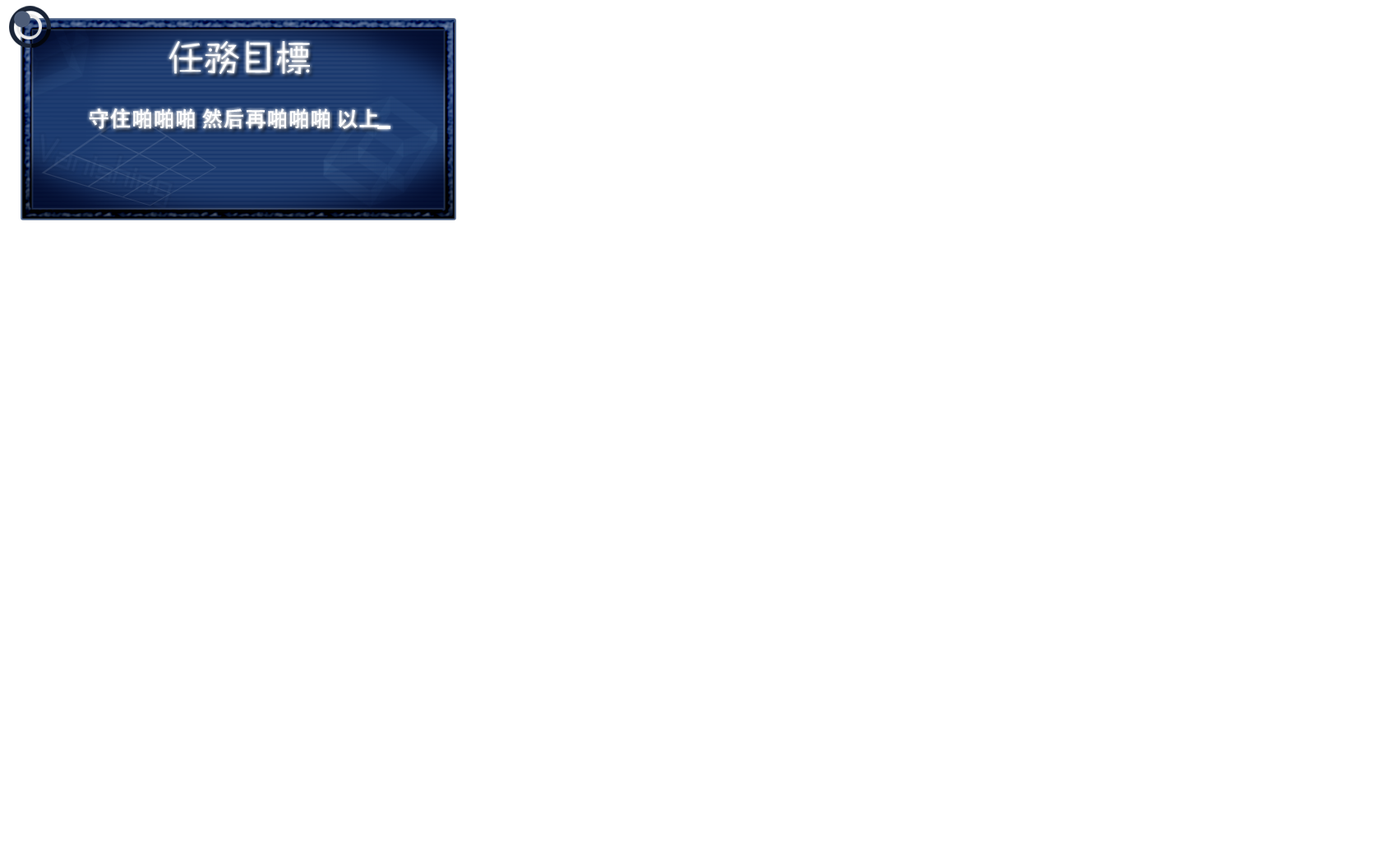
<style>
.page{position:relative;width:1381px;height:863px;background:#ffffff}
.page>*{position:absolute;margin:0}
.t1{font:36.1px "FZZHYFW--GB1-0";color:#ffffff}
.t2{font:21.9px "AdobeHeitiStd-Regular";color:#ffffff}
</style>
<div class="page">
<p class="t1" style="left:169px;top:41px;width:141px;height:33px">任务目标</p>
<p class="t2" style="left:89px;top:108px;width:290px;height:21px">守住啪啪啪 然后再啪啪啪 以上</p>
</div>
